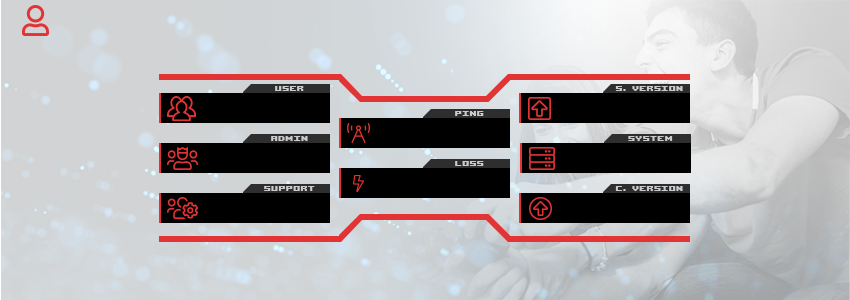
<style>
.page{position:relative;width:850px;height:300px}
.page>*{position:absolute;margin:0}
.t1{font:13px "AcknowledgeTTBRK";letter-spacing:0.04em;color:#cccccc}
</style>
<div class="page">
<p class="t1" style="left:275px;top:86px;width:29px;height:5px">USER</p>
<p class="t1" style="left:615px;top:86px;width:68px;height:5px">S. VERSION</p>
<p class="t1" style="left:455px;top:111px;width:29px;height:5px">PING</p>
<p class="t1" style="left:271px;top:136px;width:37px;height:5px">ADMIN</p>
<p class="t1" style="left:628px;top:136px;width:45px;height:5px">SYSTEM</p>
<p class="t1" style="left:455px;top:161px;width:29px;height:5px">LOSS</p>
<p class="t1" style="left:264px;top:186px;width:51px;height:5px">SUPPORT</p>
<p class="t1" style="left:615px;top:186px;width:68px;height:5px">C. VERSION</p>
</div>
